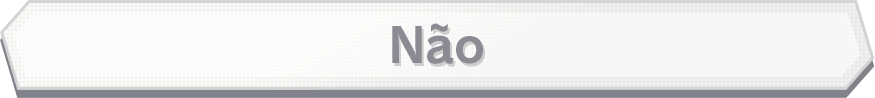
<style>
.page{position:relative;width:875px;height:98px;background:#fbfafb}
.page>*{position:absolute;margin:0}
.t1{font:48px "RodinPro-B";color:#8c8b93}
</style>
<div class="page">
<p class="t1" style="left:392px;top:23px;width:91px;height:41px">Não</p>
</div>
